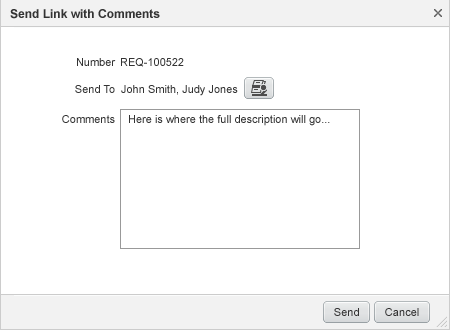
<style>
.page{position:relative;width:450px;height:330px;background:#ffffff}
.page>*{position:absolute;margin:0}
.t1{font:12px "Arial-BoldMT";color:#333333}
.t2{font:11px "ArialMT";color:#333333}
.t3{font:11px "ArialMT";letter-spacing:0.005em;color:#333333}
</style>
<div class="page">
<p class="t1" style="left:10px;top:9px;width:150px;height:10px">Send Link with Comments</p>
<p class="t2" style="left:77px;top:58px;width:39px;height:8px">Number</p>
<p class="t2" style="left:121px;top:58px;width:63px;height:9px">REQ-100522</p>
<p class="t2" style="left:75px;top:85px;width:40px;height:8px">Send To</p>
<p class="t2" style="left:121px;top:85px;width:117px;height:11px">John Smith, Judy Jones</p>
<p class="t2" style="left:62px;top:115px;width:53px;height:8px">Comments</p>
<p class="t2" style="left:129px;top:115px;width:201px;height:11px">Here is where the full description will go...</p>
<p class="t3" style="left:334px;top:308px;width:25px;height:8px">Send</p>
<p class="t3" style="left:385px;top:308px;width:34px;height:8px">Cancel</p>
</div>
